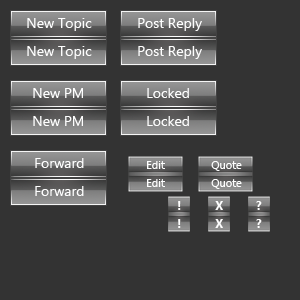
<style>
.page{position:relative;width:300px;height:300px;background:#333333}
.page>*{position:absolute;margin:0}
.t1{font:14px "SegoeUI";color:#fefefe}
.t2{font:11px "SegoeUI";color:#fefefe}
.t3{font:12px "SegoeUI-Bold";color:#fefefe}
</style>
<div class="page">
<p class="t1" style="left:27px;top:18px;width:65px;height:13px">New Topic</p>
<p class="t1" style="left:138px;top:18px;width:64px;height:13px">Post Reply</p>
<p class="t1" style="left:27px;top:46px;width:65px;height:13px">New Topic</p>
<p class="t1" style="left:138px;top:46px;width:64px;height:13px">Post Reply</p>
<p class="t1" style="left:33px;top:88px;width:50px;height:10px">New PM</p>
<p class="t1" style="left:147px;top:88px;width:42px;height:10px">Locked</p>
<p class="t1" style="left:33px;top:116px;width:50px;height:10px">New PM</p>
<p class="t1" style="left:147px;top:116px;width:42px;height:10px">Locked</p>
<p class="t1" style="left:35px;top:158px;width:49px;height:10px">Forward</p>
<p class="t2" style="left:147px;top:161px;width:18px;height:8px">Edit</p>
<p class="t2" style="left:211px;top:161px;width:31px;height:10px">Quote</p>
<p class="t2" style="left:147px;top:179px;width:18px;height:8px">Edit</p>
<p class="t2" style="left:211px;top:179px;width:31px;height:10px">Quote</p>
<p class="t1" style="left:35px;top:186px;width:49px;height:10px">Forward</p>
<p class="t3" style="left:178px;top:201px;width:3px;height:9px">!</p>
<p class="t3" style="left:215px;top:201px;width:8px;height:9px">X</p>
<p class="t3" style="left:256px;top:201px;width:6px;height:9px">?</p>
<p class="t3" style="left:178px;top:219px;width:3px;height:9px">!</p>
<p class="t3" style="left:215px;top:219px;width:8px;height:9px">X</p>
<p class="t3" style="left:256px;top:219px;width:6px;height:9px">?</p>
</div>
